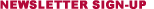
<style>
.page{position:relative;width:154px;height:9px;background:#b30838}
.page>*{position:absolute;margin:0}
.t1{font:11px "Arial-Black";letter-spacing:0.015em;color:#b30838;font-weight:bold}
</style>
<div class="page">
<p class="t1" style="left:0px;top:0px;width:146px;height:9px">NEWSLETTER SIGN-UP</p>
</div>
